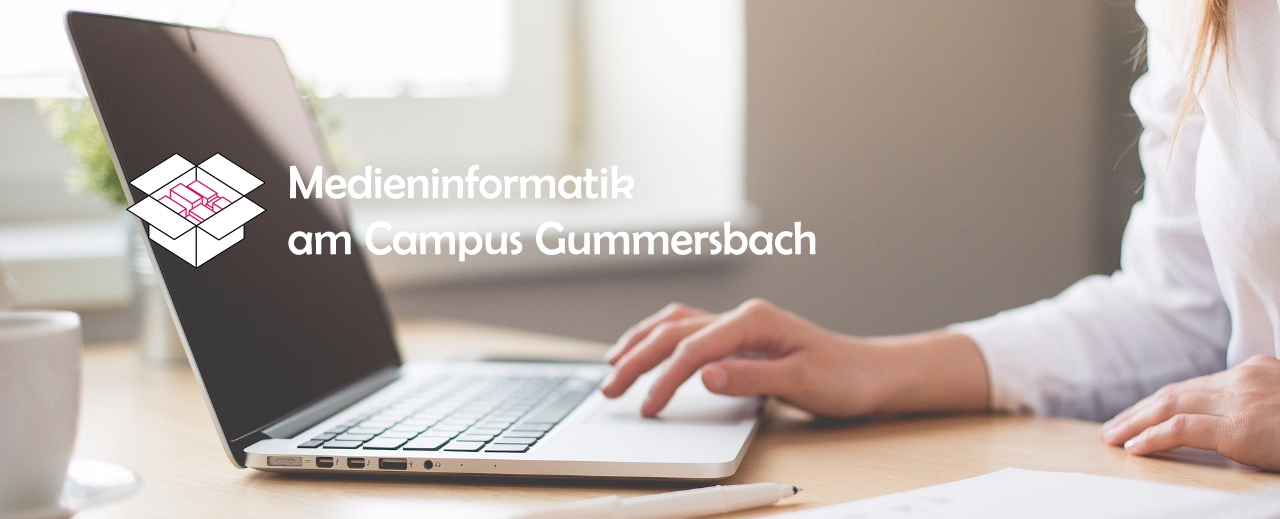
<style>
.page{position:relative;width:1280px;height:519px}
.page>*{position:absolute;margin:0}
.t1{font:46.7px "BerlinSansFB-Reg";color:#ffffff}
</style>
<div class="page">
<p class="t1" style="left:288px;top:164px;width:528px;height:98px">Medieninformatik<br>am Campus Gummersbach</p>
</div>
